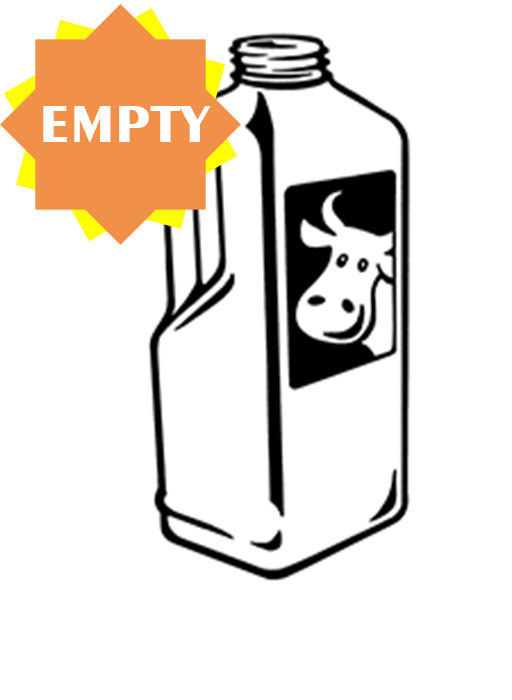
<style>
.page{position:relative;width:512px;height:700px;background:#ffffff}
.page>*{position:absolute;margin:0}
.t1{font:55.8px "Exotic350BT-Bold";color:#ffffff}
</style>
<div class="page">
<p class="t1" style="left:43px;top:106px;width:168px;height:36px">EMPTY</p>
</div>
